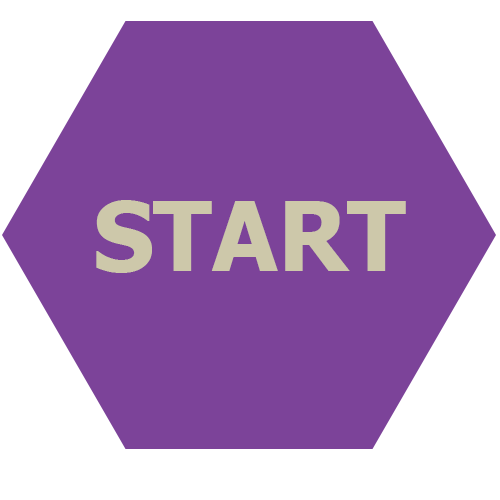
<style>
.page{position:relative;width:500px;height:500px;background:#7c4399}
.page>*{position:absolute;margin:0}
.t1{font:95.7px "Tahoma-Bold";color:#cdc8aa}
</style>
<div class="page">
<p class="t1" style="left:96px;top:200px;width:310px;height:73px">START</p>
</div>
